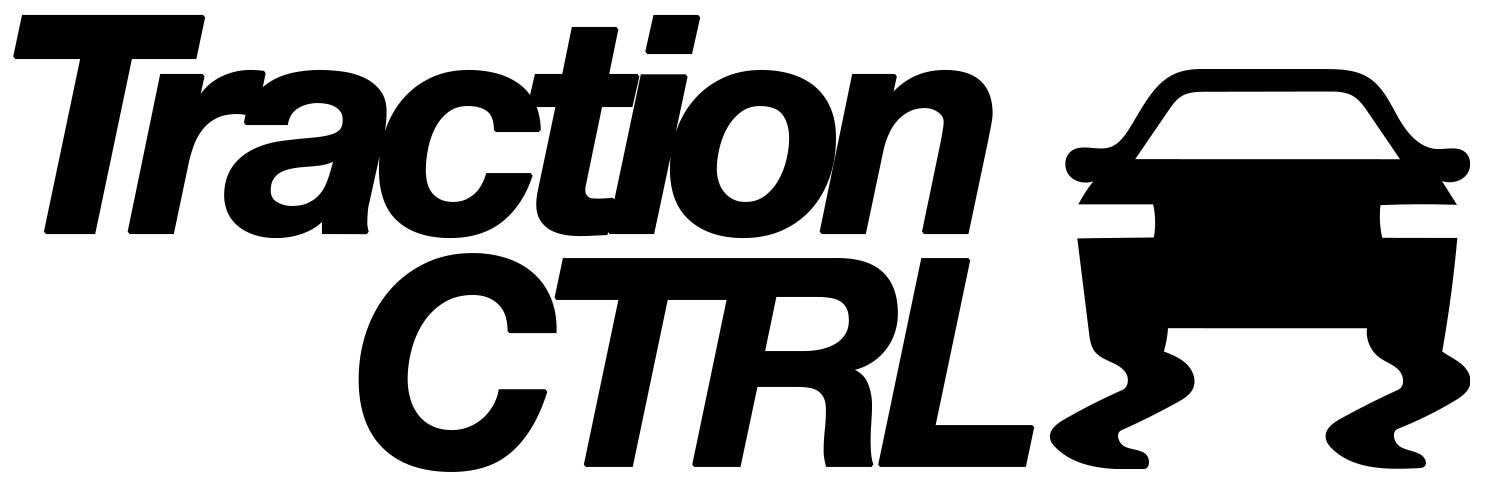
<style>
.page{position:relative;width:1500px;height:500px;background:#ffffff}
.page>*{position:absolute;margin:0}
.t1{font:300.7px "HelveticaNeue-BoldItalic";letter-spacing:-0.1em;color:#000000;font-weight:bold}
.t2{font:286.6px "HelveticaNeue-BoldItalic";letter-spacing:-0.1em;color:#000000;font-weight:bold}
</style>
<div class="page">
<p class="t1" style="left:13px;top:14px;width:980px;height:225px">Traction</p>
<p class="t2" style="left:358px;top:253px;width:677px;height:219px">CTRL</p>
</div>
